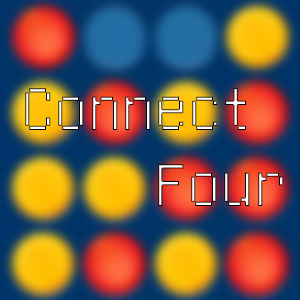
<style>
.page{position:relative;width:300px;height:300px}
.page>*{position:absolute;margin:0}
.t1{font:66.7px "GNUUnifontFull"}
</style>
<div class="page">
<p class="t1" style="left:25px;top:88px;width:221px;height:42px">Connect</p>
<p class="t1" style="left:158px;top:164px;width:126px;height:42px">Four</p>
</div>
